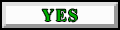
<style>
.page{position:relative;width:120px;height:30px;background:#fcfcfc}
.page>*{position:absolute;margin:0}
.t1{font:16.7px "TimesNewRomanPS-BoldMT";letter-spacing:0.1em;color:#00b000}
</style>
<div class="page">
<p class="t1" style="left:42px;top:9px;width:35px;height:13px">YES</p>
</div>
